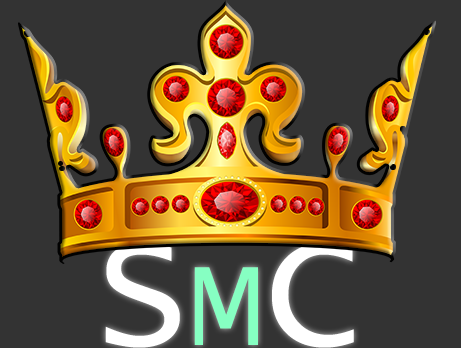
<style>
.page{position:relative;width:461px;height:348px;background:#333333}
.page>*{position:absolute;margin:0}
.t1{font:159px "LucidaConsole";color:#ffffff}
.t2{font:124px "LucidaConsole";color:#86ffc2}
</style>
<div class="page">
<p class="t1" style="left:105px;top:243px;width:249px;height:105px">S<span class="t2">M</span>C</p>
</div>
